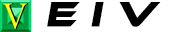
<style>
.page{position:relative;width:187px;height:32px;background:#ffffff}
.page>*{position:absolute;margin:0}
.t1{font:36px "EthnocentricRg-Regular";color:#010101;font-style:italic}
</style>
<div class="page">
<p class="t1" style="left:47px;top:2px;width:114px;height:25px">E I V</p>
</div>
